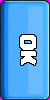
<style>
.page{position:relative;width:50px;height:100px}
.page>*{position:absolute;margin:0}
.t1{font:16px "Supercell-Magic";color:#ffffff}
</style>
<div class="page">
<p class="t1" style="left:20px;top:34px;width:17px;height:32px;rotate:90deg">OK</p>
</div>
